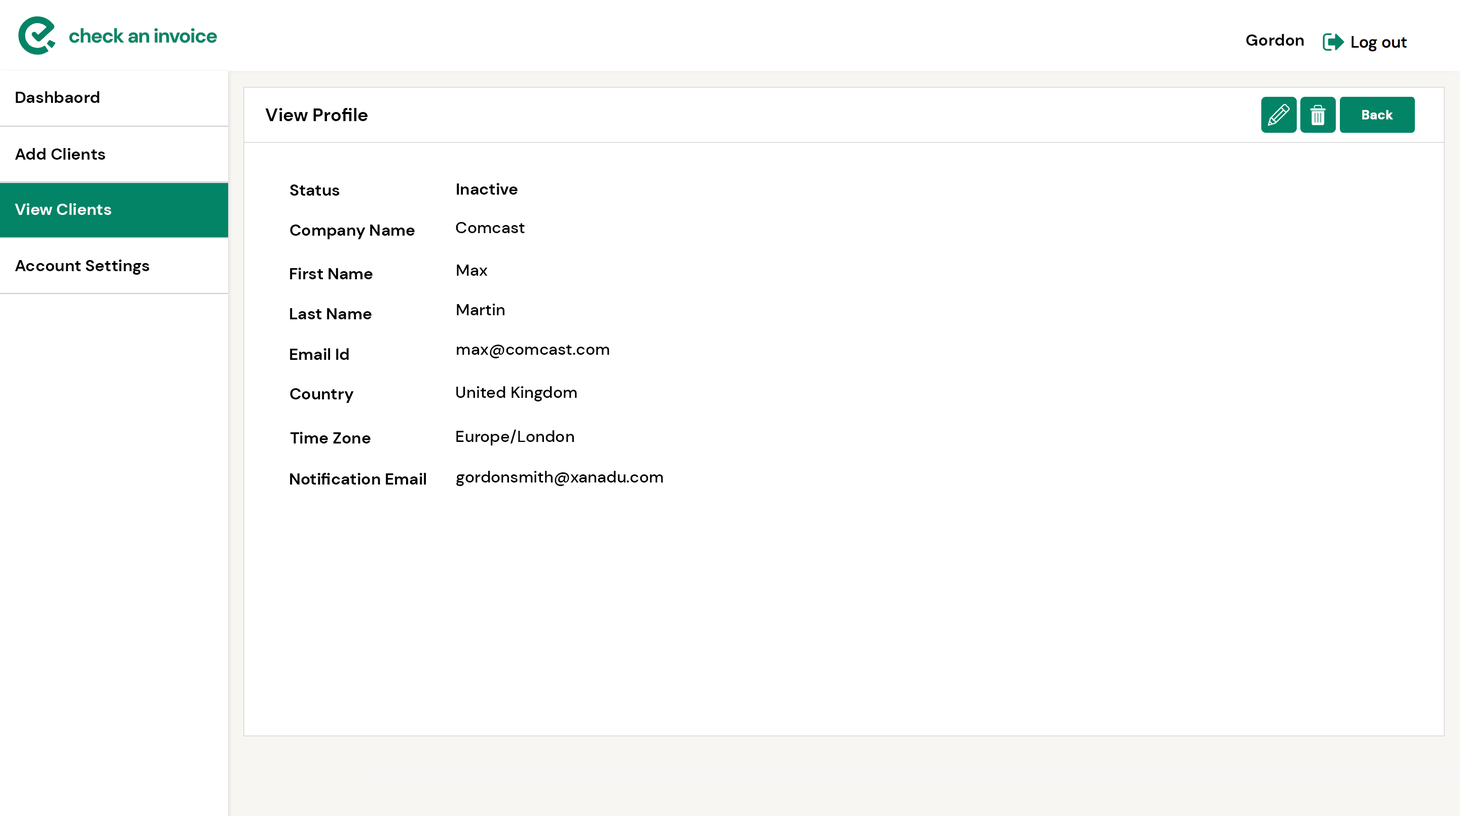
<style>
.page{position:relative;width:1460px;height:816px;background:#ffffff}
.page>*{position:absolute;margin:0}
.t1{font:16.2px "DMSans-Bold";color:#000000}
.t2{font:18.3px "DMSans-Bold";color:#010101}
.t3{font:12.7px "DMSans-Bold";color:#ffffff;font-weight:bold}
.t4{font:16.2px "DMSans-Bold";color:#ffffff}
.t5{font:16.2px "DMSans-Medium";color:#000000}
</style>
<div class="page">
<p class="t1" style="left:1246px;top:34px;width:58px;height:12px">Gordon</p>
<p class="t1" style="left:16px;top:91px;width:83px;height:12px">Dashbaord</p>
<p class="t2" style="left:265px;top:108px;width:103px;height:13px">View Profile</p>
<p class="t3" style="left:1363px;top:110px;width:31px;height:10px">Back</p>
<p class="t1" style="left:15px;top:148px;width:90px;height:12px">Add Clients</p>
<p class="t1" style="left:290px;top:185px;width:50px;height:11px">Status</p>
<p class="t1" style="left:457px;top:183px;width:61px;height:12px">Inactive</p>
<p class="t4" style="left:15px;top:203px;width:97px;height:12px">View Clients</p>
<p class="t1" style="left:290px;top:225px;width:125px;height:14px">Company Name</p>
<p class="t5" style="left:456px;top:222px;width:69px;height:11px">Comcast</p>
<p class="t1" style="left:15px;top:260px;width:135px;height:15px">Account Settings</p>
<p class="t1" style="left:290px;top:268px;width:83px;height:11px">First Name</p>
<p class="t5" style="left:457px;top:265px;width:31px;height:11px">Max</p>
<p class="t5" style="left:457px;top:304px;width:48px;height:11px">Martin</p>
<p class="t1" style="left:290px;top:308px;width:82px;height:11px">Last Name</p>
<p class="t1" style="left:290px;top:348px;width:59px;height:12px">Email Id</p>
<p class="t5" style="left:457px;top:345px;width:153px;height:14px">max@comcast.com</p>
<p class="t1" style="left:290px;top:388px;width:64px;height:15px">Country</p>
<p class="t5" style="left:456px;top:386px;width:121px;height:16px">United Kingdom</p>
<p class="t1" style="left:290px;top:432px;width:81px;height:12px">Time Zone</p>
<p class="t5" style="left:456px;top:430px;width:118px;height:16px">Europe/London</p>
<p class="t1" style="left:290px;top:473px;width:136px;height:12px">Notification Email</p>
<p class="t5" style="left:456px;top:471px;width:207px;height:15px">gordonsmith@xanadu.com</p>
</div>
